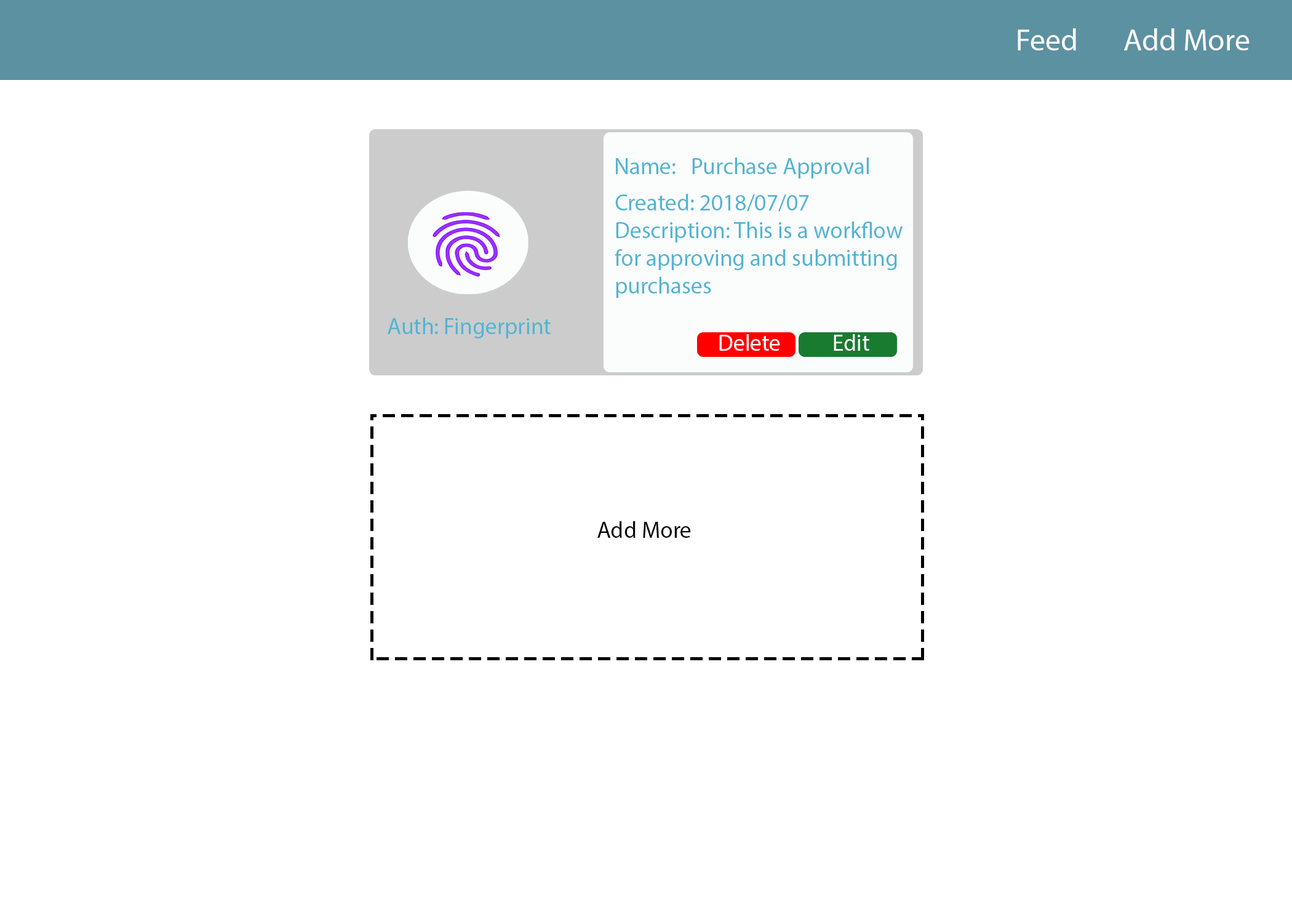
<style>
.page{position:relative;width:1292px;height:923px;background:#ffffff}
.page>*{position:absolute;margin:0}
.t1{font:30.8px "MyriadPro-Regular";color:#fbfbfb}
.t2{font:23.1px "MyriadPro-Regular";color:#52b4d2}
.t3{font:23.1px "MyriadPro-Regular";color:#fdfdfd}
.t4{font:23.1px "MyriadPro-Regular";color:#050505}
</style>
<div class="page">
<p class="t1" style="left:1018px;top:28px;width:58px;height:22px">Feed</p>
<p class="t1" style="left:1124px;top:28px;width:126px;height:22px">Add More</p>
<p class="t2" style="left:616px;top:158px;width:253px;height:20px">Name:   Purchase Approval</p>
<p class="t2" style="left:615px;top:194px;width:288px;height:104px">Created: 2018/07/07<br>Description: This is a workflow<br>for approving and submitting<br>purchases</p>
<p class="t2" style="left:388px;top:317px;width:163px;height:21px">Auth: Fingerprint</p>
<p class="t3" style="left:719px;top:334px;width:61px;height:17px">Delete</p>
<p class="t3" style="left:834px;top:334px;width:35px;height:17px">Edit</p>
<p class="t4" style="left:597px;top:521px;width:94px;height:17px">Add More</p>
</div>
